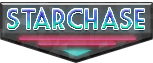
<style>
.page{position:relative;width:153px;height:63px;background:#ffffff}
.page>*{position:absolute;margin:0}
.t1{font:28px "MarketDeco"}
</style>
<div class="page">
<p class="t1" style="left:8px;top:8px;width:136px;height:21px">StarChase</p>
</div>
